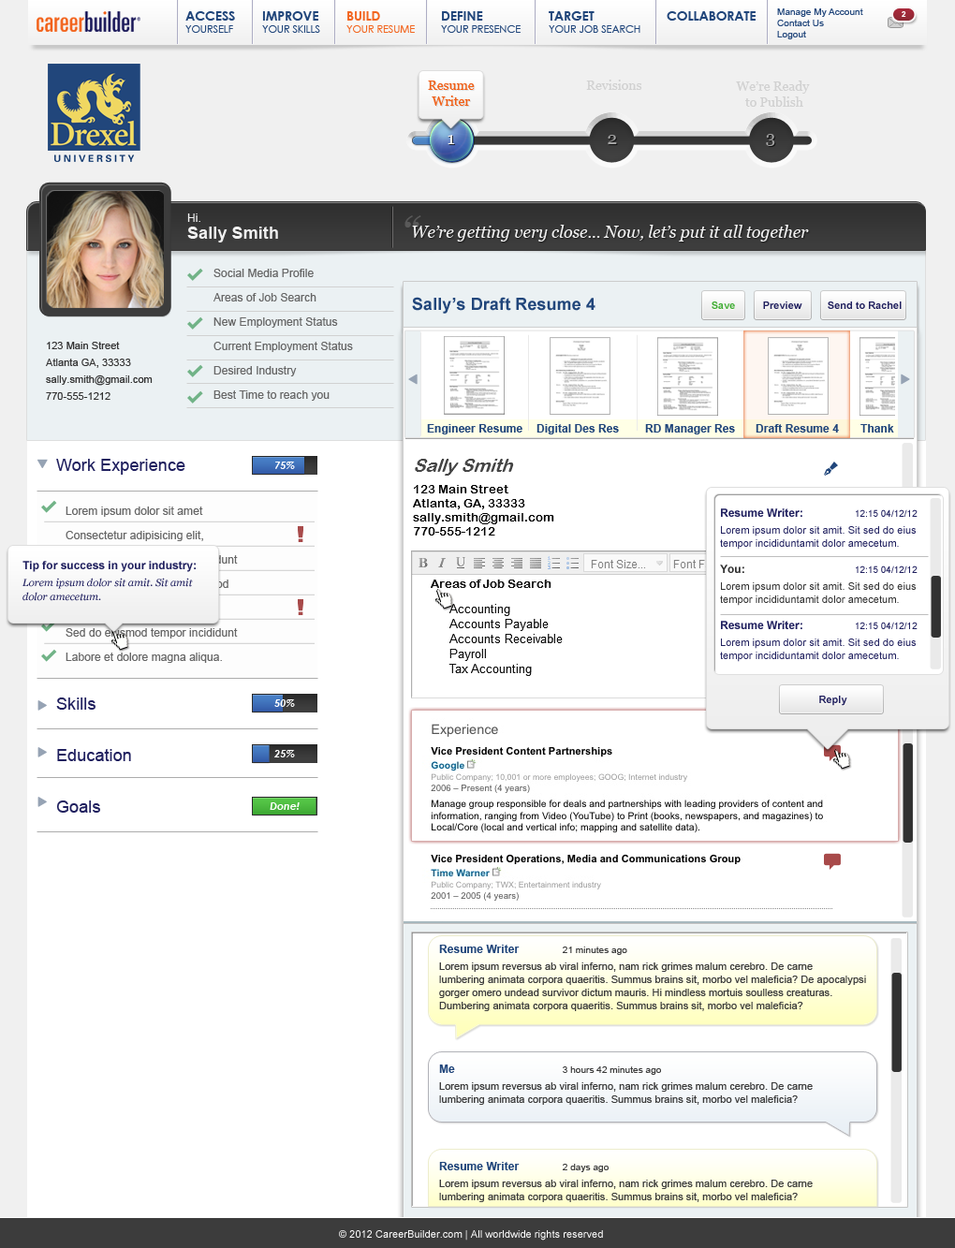
<style>
.page{position:relative;width:955px;height:1248px;background:#ffffff}
.page>*{position:absolute;margin:0}
.t1{font:10.3px "CenturyGothic";letter-spacing:-0.01em;color:#21467b;text-transform:uppercase}
.t2{font:13.1px "CenturyGothic-Bold";letter-spacing:-0.01em;color:#21467b;text-transform:uppercase}
.t3{font:10.3px "CenturyGothic";letter-spacing:-0.01em;color:#f26620;text-transform:uppercase}
.t4{font:13.1px "CenturyGothic-Bold";letter-spacing:-0.01em;color:#f26620;text-transform:uppercase}
.t5{font:9.4px/11.2px "ArialMT";letter-spacing:0.005em;color:#21467b}
.t6{font:7.5px "Arial-BoldMT";letter-spacing:0.005em;color:#ffffff}
.t7{font:13.3px "Georgia";letter-spacing:-0.01em;color:#f16018}
.t8{font:13.3px "Georgia";letter-spacing:-0.01em;color:#d1d1d1}
.t9{font:17.7px "Georgia";letter-spacing:0.005em;color:#f0f0f0}
.t10{font:17.7px "Georgia";letter-spacing:0.005em;color:#a2a2a2}
.t11{font:16.9px/16.9px "Arial-BoldMT";letter-spacing:0.005em;color:#f0f0f0}
.t12{font:11.2px/16.9px "ArialMT";letter-spacing:0.005em;color:#f0f0f0}
.t13{font:45px "Georgia-Italic";letter-spacing:-0.01em;color:#595959}
.t14{font:16.9px "Georgia-Italic";letter-spacing:-0.01em;color:#f0f0f0}
.t15{font:11.2px/24.3px "ArialMT";letter-spacing:0.005em;color:#666666}
.t16{font:16.9px "Arial-BoldMT";letter-spacing:0.005em;color:#21467b}
.t17{font:10.3px "Arial-BoldMT";color:#40ac35}
.t18{font:10.3px "Arial-BoldMT";color:#20205f}
.t19{font:10.3px/16.9px "ArialMT";letter-spacing:0.005em;color:#333333}
.t20{font:11.2px "Arial-BoldMT";letter-spacing:0.005em;color:#21467b}
.t21{font:16.9px/51.5px "ArialMT";letter-spacing:0.005em;color:#20205f}
.t22{font:16.9px/238.8px "ArialMT";letter-spacing:0.005em;color:#20205f}
.t23{font:10.3px "CenturyGothic-BoldItalic";letter-spacing:0.005em;color:#ffffff}
.t24{font:10.3px/16.9px "ArialMT";letter-spacing:0.005em;color:#20205f}
.t25{font:11.2px/13.1px "Arial-BoldMT";color:#20205f}
.t26{font:9.4px/13.1px "ArialMT";color:#20205f}
.t27{font:10.3px/13.1px "ArialMT";letter-spacing:0.005em;color:#20205f}
.t28{font:11.2px/13.1px "Arial-BoldMT";color:#303030}
.t29{font:10.3px/16.9px "ArialMT";letter-spacing:0.005em;color:#303030}
.t30{font:10.3px/13.1px "ArialMT";letter-spacing:0.005em;color:#303030}
.t31{font:10.3px/16.9px "Georgia-Italic";letter-spacing:0.005em;color:#20205f}
.t32{font:11.2px/16.9px "Arial-BoldMT";color:#20205f}
.t33{font:10.3px/14px "Georgia-Italic";letter-spacing:0.005em;color:#20205f}
.t34{font:10.3px/13.1px "ArialMT";letter-spacing:0.005em;color:#3c3c3c}
.t35{font:11.2px/24.3px "Arial-BoldMT";letter-spacing:0.005em;color:#21467b}
.t36{font:9.4px/24.3px "ArialMT";letter-spacing:0.005em;color:#3c3c3c}
.t37{font:10.3px/16.9px "ArialMT";letter-spacing:0.005em;color:#3c3c3c}
.t38{font:10.3px "ArialMT";letter-spacing:0.005em;color:#ffffff}
</style>
<div class="page">
<p class="t1" style="left:185px;top:11px;width:50px;height:22px"><span class="t2">Access<br></span>yourself</p>
<p class="t1" style="left:262px;top:11px;width:58px;height:22px"><span class="t2">Improve<br></span>your skills</p>
<p class="t3" style="left:347px;top:11px;width:68px;height:22px"><span class="t4">Build <br></span>your resume</p>
<p class="t1" style="left:441px;top:11px;width:80px;height:22px"><span class="t2">Define<br></span>your Presence</p>
<p class="t1" style="left:549px;top:11px;width:92px;height:22px"><span class="t2">Target <br></span>your Job Search</p>
<p class="t2" style="left:667px;top:11px;width:89px;height:10px">Collaborate</p>
<p class="t5" style="left:777px;top:8px;width:86px;height:31px">Manage My Account<br>Contact Us<br>Logout</p>
<p class="t6" style="left:902px;top:11px;width:5px;height:6px">2</p>
<p class="t7" style="left:428px;top:81px;width:47px;height:25px;text-align:center">Resume<br>Writer</p>
<p class="t8" style="left:586px;top:80px;width:56px;height:10px">Revisions</p>
<p class="t8" style="left:736px;top:81px;width:74px;height:26px;text-align:center">We’re Ready <br>to Publish</p>
<p class="t9" style="left:448px;top:135px;width:7px;height:9px">1</p>
<p class="t10" style="left:608px;top:135px;width:9px;height:9px">2</p>
<p class="t10" style="left:766px;top:134px;width:9px;height:12px">3</p>
<p class="t11" style="left:187px;top:214px;width:91px;height:29px"><span class="t12">Hi.<br></span>Sally Smith</p>
<p class="t13" style="left:405px;top:215px;width:16px;height:13px">“</p>
<p class="t14" style="left:412px;top:225px;width:397px;height:17px">We’re getting very close... Now, let’s put it all together</p>
<p class="t15" style="left:214px;top:269px;width:139px;height:132px">Social Media Profile<br>Areas of Job Search<br>New Employment Status<br>Current Employment Status<br>Desired Industry<br>Best Time to reach you</p>
<p class="t16" style="left:412px;top:297px;width:184px;height:17px">Sally’s Draft Resume 4</p>
<p class="t17" style="left:712px;top:302px;width:23px;height:7px">Save</p>
<p class="t18" style="left:763px;top:302px;width:40px;height:7px">Preview</p>
<p class="t18" style="left:828px;top:302px;width:74px;height:7px">Send to Rachel</p>
<p class="t19" style="left:46px;top:342px;width:107px;height:58px">123 Main Street<br>Atlanta GA, 33333<br>sally.smith@gmail.com<br>770-555-1212</p>
<p class="t20" style="left:427px;top:424px;width:96px;height:11px">Engineer Resume</p>
<p class="t20" style="left:537px;top:424px;width:82px;height:11px">Digital Des Res</p>
<p class="t20" style="left:645px;top:424px;width:90px;height:11px">RD Manager Res</p>
<p class="t20" style="left:756px;top:424px;width:83px;height:9px">Draft Resume 4</p>
<p class="t20" style="left:861px;top:424px;width:33px;height:9px">Thank</p>
<p class="t21" style="left:56px;top:459px;width:129px;height:354px">Work Experience<br><span class="t22">Skills<br></span>Education<br>Goals</p>
<p class="t23" style="left:275px;top:462px;width:20px;height:7px">75%</p>
<p class="t15" style="left:66px;top:507px;width:172px;height:156px">Lorem ipsum dolor sit amet<br>Consectetur adipisicing elit,<br>Sed do eiusmod tempor incididunt <br>Lorem ipsum doSed do eiusmod <br><br>Sed do eiusmod tempor incididunt <br>Labore et dolore magna aliqua.</p>
<p class="t24" style="left:720px;top:509px;width:198px;height:153px"><span class="t25">Resume Writer:  </span><span class="t26">12:15 04/12/12<br></span>Lorem ipsum dolor sit amit. Sit sed do eius<br><span class="t27">tempor incididuntamit dolor amecetum. <br><br></span><span class="t28">You:    </span><span class="t26">12:15 04/12/12<br></span><span class="t29">Lorem ipsum dolor sit amit. Sit sed do eius <br></span><span class="t30">tempor incididuntamit dolor amecetum.<br><br></span><span class="t25">Resume Writer:  </span><span class="t26">12:15 04/12/12<br></span>Lorem ipsum dolor sit amit. Sit sed do eius <br><span class="t27">tempor incididuntamit dolor amecetum.</span></p>
<p class="t31" style="left:22px;top:561px;width:174px;height:40px"><span class="t32">Tip for success in your industry:<br></span>Lorem ipsum dolor sit amit. Sit amit<br><span class="t33">dolor amecetum.</span></p>
<p class="t23" style="left:274px;top:700px;width:21px;height:7px">50%</p>
<p class="t18" style="left:819px;top:696px;width:29px;height:10px">Reply</p>
<p class="t23" style="left:274px;top:750px;width:21px;height:8px">25%</p>
<p class="t23" style="left:270px;top:803px;width:30px;height:7px">Done!</p>
<p class="t34" style="left:439px;top:945px;width:427px;height:66px"><span class="t35">Resume Writer        </span><span class="t36">21 minutes ago<br></span><span class="t37">Lorem ipsum reversus ab viral inferno, nam rick grimes malum cerebro. De carne<br></span>lumbering animata corpora quaeritis. Summus brains sit​​, morbo vel maleficia? De apocalypsi<br>gorger omero undead survivor dictum mauris. Hi mindless mortuis soulless creaturas. <br>Dumbering animata corpora quaeritis. Summus brains sit​​, morbo vel maleficia?</p>
<p class="t37" style="left:439px;top:1065px;width:374px;height:40px"><span class="t35">Me          </span><span class="t36">3 hours 42 minutes ago<br></span>Lorem ipsum reversus ab viral inferno, nam rick grimes malum cerebro. De carne<br><span class="t34">lumbering animata corpora quaeritis. Summus brains sit​​, morbo vel maleficia?</span></p>
<p class="t37" style="left:439px;top:1162px;width:374px;height:40px"><span class="t35">Resume Writer        </span><span class="t36">2 days ago<br></span>Lorem ipsum reversus ab viral inferno, nam rick grimes malum cerebro. De carne<br><span class="t34">lumbering animata corpora quaeritis. Summus brains sit​​, morbo vel maleficia?</span></p>
<p class="t38" style="left:339px;top:1231px;width:264px;height:10px">© 2012 CareerBuilder.com | All worldwide rights reserved</p>
</div>
